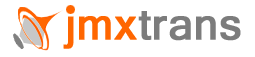
<style>
.page{position:relative;width:255px;height:57px;background:#ffffff}
.page>*{position:absolute;margin:0}
.t1{font:48.2px "Vrinda";letter-spacing:0.01em;color:#7c7c7c;font-weight:bold}
.t2{font:48.2px "Vrinda";letter-spacing:0.01em;color:#ff6600;font-weight:bold}
</style>
<div class="page">
<p class="t1" style="left:63px;top:8px;width:178px;height:41px"><span class="t2">jmx</span>trans</p>
</div>
